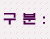
<style>
.page{position:relative;width:50px;height:39px;background:#f4f0f2}
.page>*{position:absolute;margin:0}
.t1{font:14px "ExpoM-HM";color:#4b0049}
</style>
<div class="page">
<p class="t1" style="left:3px;top:13px;width:42px;height:12px">구 분 :</p>
</div>
